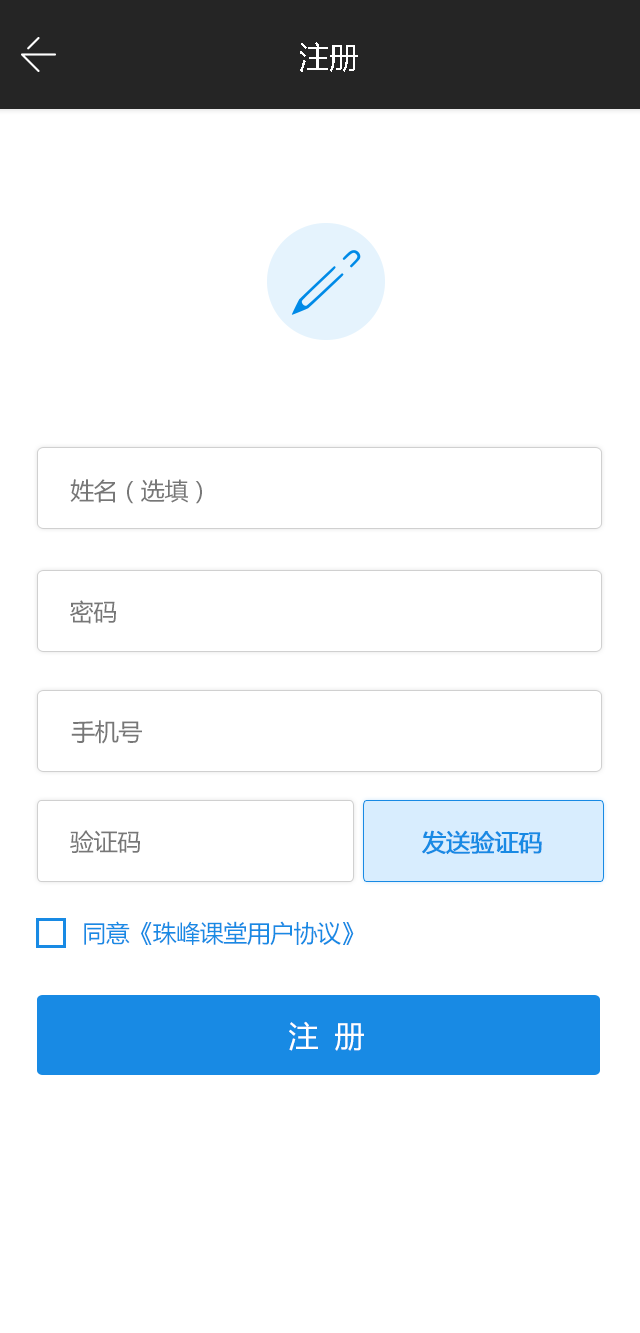
<style>
.page{position:relative;width:640px;height:1333px;background:#ffffff}
.page>*{position:absolute;margin:0}
.t1{font:30px "MicrosoftYaHei";color:#ffffff}
.t2{font:24px "MicrosoftYaHei";letter-spacing:-0.02em;color:#777777}
.t3{font:24px "MicrosoftYaHei";letter-spacing:-0.02em;color:#188ae4;font-weight:bold}
.t4{font:24px "MicrosoftYaHei";letter-spacing:-0.02em;color:#188ae4}
.t5{font:30px "MicrosoftYaHei";letter-spacing:-0.02em;color:#ffffff}
</style>
<div class="page">
<p class="t1" style="left:300px;top:42px;width:58px;height:30px">注册</p>
<p class="t2" style="left:70px;top:479px;width:132px;height:25px">姓名（选填）</p>
<p class="t2" style="left:70px;top:600px;width:46px;height:24px">密码</p>
<p class="t2" style="left:71px;top:720px;width:71px;height:24px">手机号</p>
<p class="t2" style="left:70px;top:830px;width:70px;height:23px">验证码</p>
<p class="t3" style="left:422px;top:830px;width:120px;height:25px">发送验证码</p>
<p class="t4" style="left:84px;top:921px;width:270px;height:25px">同意《珠峰课堂用户协议》</p>
<p class="t5" style="left:289px;top:1021px;width:75px;height:30px">注  册</p>
</div>
